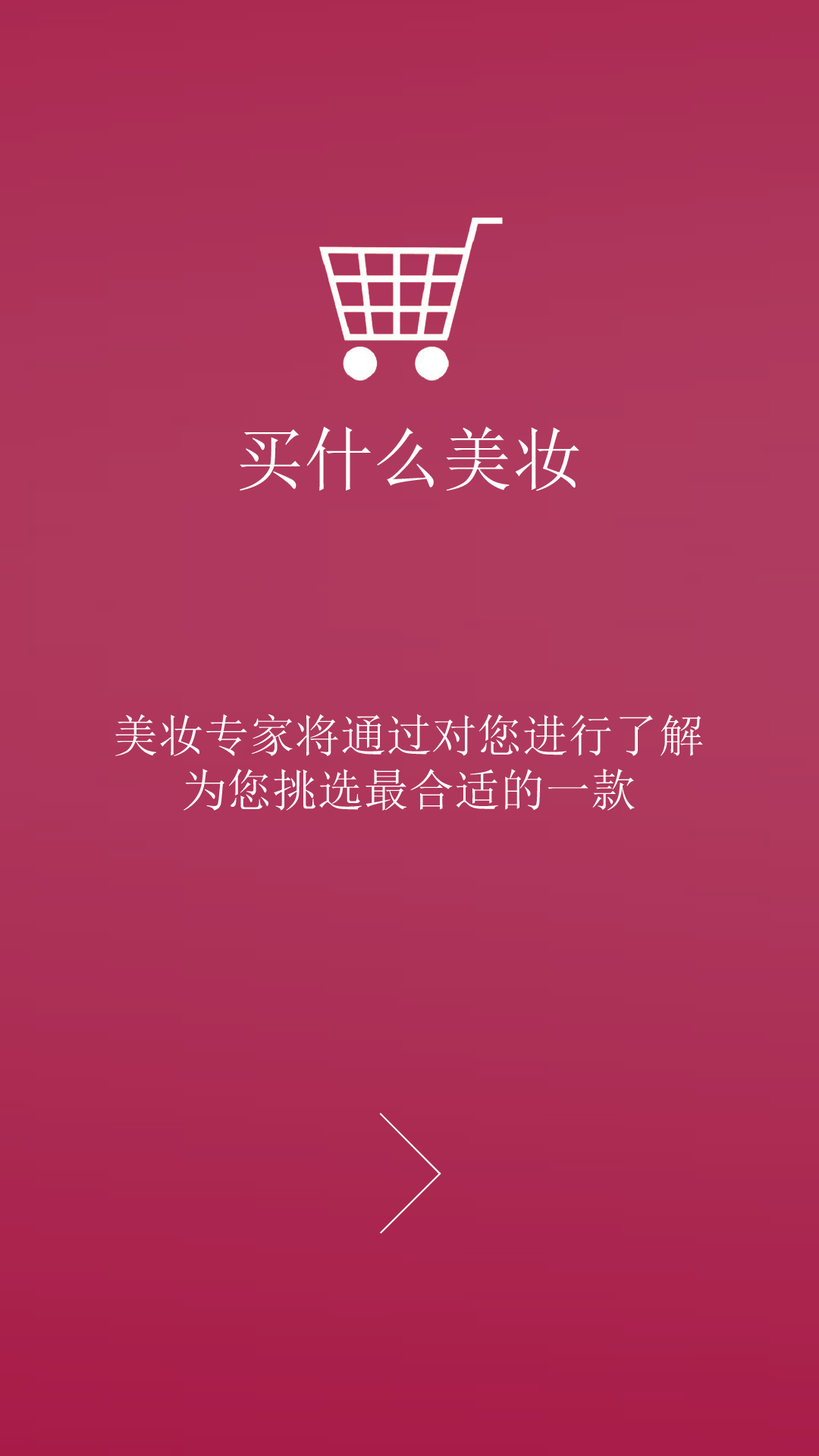
<style>
.page{position:relative;width:819px;height:1456px}
.page>*{position:absolute;margin:0}
.t1{font:69.7px "SimSun";color:#ffffff}
.t2{font:45.5px "SimSun";color:#ffffff}
</style>
<div class="page">
<p class="t1" style="left:240px;top:426px;width:339px;height:65px">买什么美妆</p>
<p class="t2" style="left:115px;top:714px;width:588px;height:97px">美妆专家将通过对您进行了解<br>   为您挑选最合适的一款</p>
</div>
